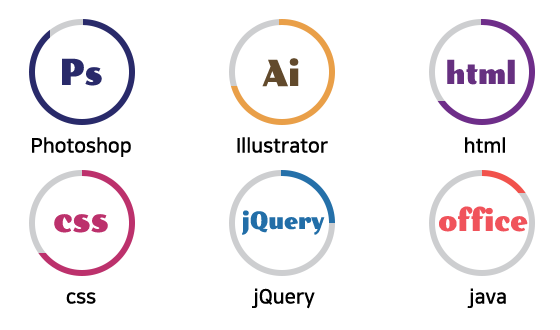
<style>
.page{position:relative;width:560px;height:330px;background:#ffffff}
.page>*{position:absolute;margin:0}
.t1{font:36px "PollerOne-Regular";color:#292a6a;scale:0.83 1}
.t2{font:36px "PollerOne-Regular";color:#624a2c;scale:0.83 1}
.t3{font:30px "PollerOne-Regular";color:#663080;scale:0.83 1}
.t4{font:20px "NanumSquareB";color:#000000}
.t5{font:30px "PollerOne-Regular";color:#f0535b;scale:0.83 1}
.t6{font:36px "PollerOne-Regular";color:#bc316c;scale:0.83 1}
.t7{font:24px "PollerOne-Regular";color:#226ea8;scale:0.83 1}
</style>
<div class="page">
<p class="t1" style="left:62px;top:58px;width:40px;height:28px">Ps</p>
<p class="t2" style="left:262px;top:58px;width:37px;height:29px">Ai</p>
<p class="t3" style="left:447px;top:59px;width:68px;height:26px">html</p>
<p class="t4" style="left:32px;top:137px;width:99px;height:20px">Photoshop</p>
<p class="t4" style="left:237px;top:137px;width:91px;height:16px">Illustrator</p>
<p class="t4" style="left:465px;top:137px;width:40px;height:16px">html</p>
<p class="t5" style="left:439px;top:206px;width:89px;height:26px">office</p>
<p class="t6" style="left:54px;top:214px;width:54px;height:19px">css</p>
<p class="t7" style="left:242px;top:210px;width:83px;height:25px">jQuery</p>
<p class="t4" style="left:66px;top:292px;width:30px;height:12px">css</p>
<p class="t4" style="left:252px;top:288px;width:63px;height:21px">jQuery</p>
<p class="t4" style="left:467px;top:288px;width:39px;height:20px">java</p>
</div>
